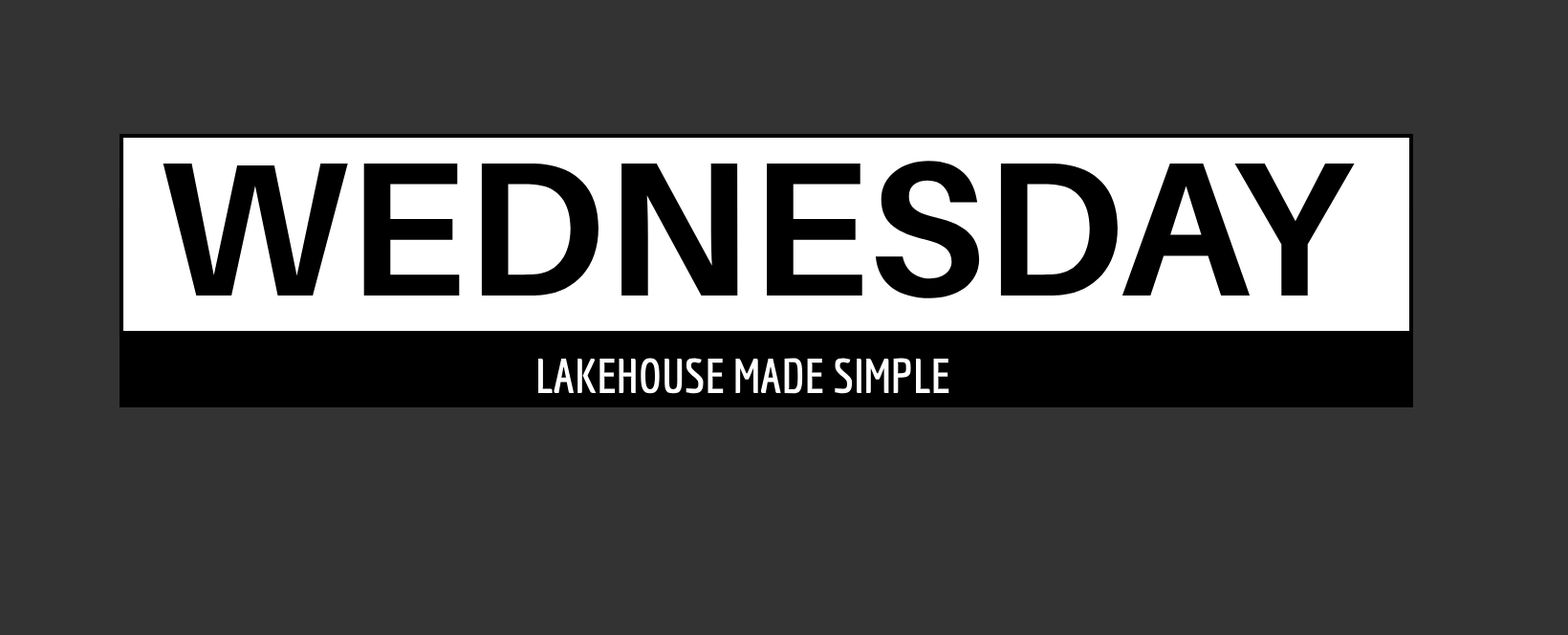
<style>
.page{position:relative;width:1568px;height:635px;background:#333333}
.page>*{position:absolute;margin:0}
.t1{font:191.2px "Aileron-Bold";color:#000000}
.t2{font:47.8px "Economica-Bold";color:#ffffff}
</style>
<div class="page">
<p class="t1" style="left:163px;top:161px;width:1192px;height:137px">WEDNESDAY</p>
<p class="t2" style="left:538px;top:358px;width:411px;height:36px">LAKEHOUSE MADE SIMPLE</p>
</div>
